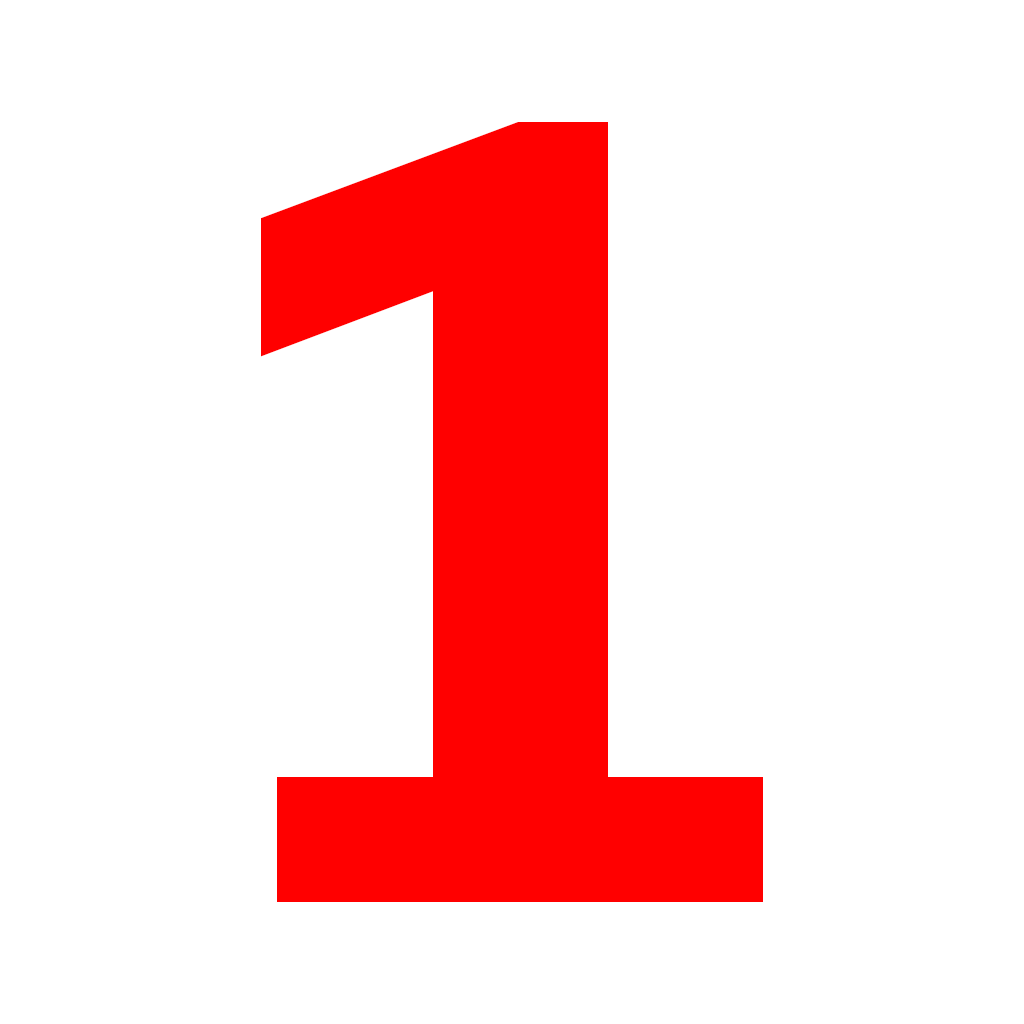
<style>
.page{position:relative;width:1024px;height:1024px;background:#ffffff}
.page>*{position:absolute;margin:0}
.t1{font:1000px "ToppanBunkyuMidashiGothicStdN-ExtraBold";color:#ff0000}
</style>
<div class="page">
<p class="t1" style="left:261px;top:122px;width:502px;height:780px">1</p>
</div>
